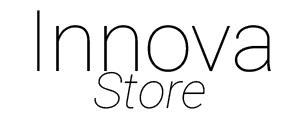
<style>
.page{position:relative;width:299px;height:114px;background:#ffffff}
.page>*{position:absolute;margin:0}
.t1{font:84.9px "Roboto-Thin";letter-spacing:-0.008em;color:#000000}
.t2{font:50.1px "Roboto-ThinItalic";letter-spacing:-0.008em;color:#000000}
</style>
<div class="page">
<p class="t1" style="left:37px;top:10px;width:234px;height:62px">Innova</p>
<p class="t2" style="left:94px;top:71px;width:111px;height:38px">Store</p>
</div>
